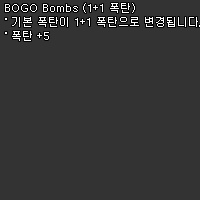
<style>
.page{position:relative;width:200px;height:200px;background:#333333}
.page>*{position:absolute;margin:0}
.t1{font:11px/14px "Dotum";color:#ffffff}
</style>
<div class="page">
<p class="t1" style="left:5px;top:3px;width:195px;height:38px">BOGO Bombs (1+1 폭탄)<br>˚ 기본 폭탄이 1+1 폭탄으로 변경됩니다.<br>˚ 폭탄 +5</p>
</div>
